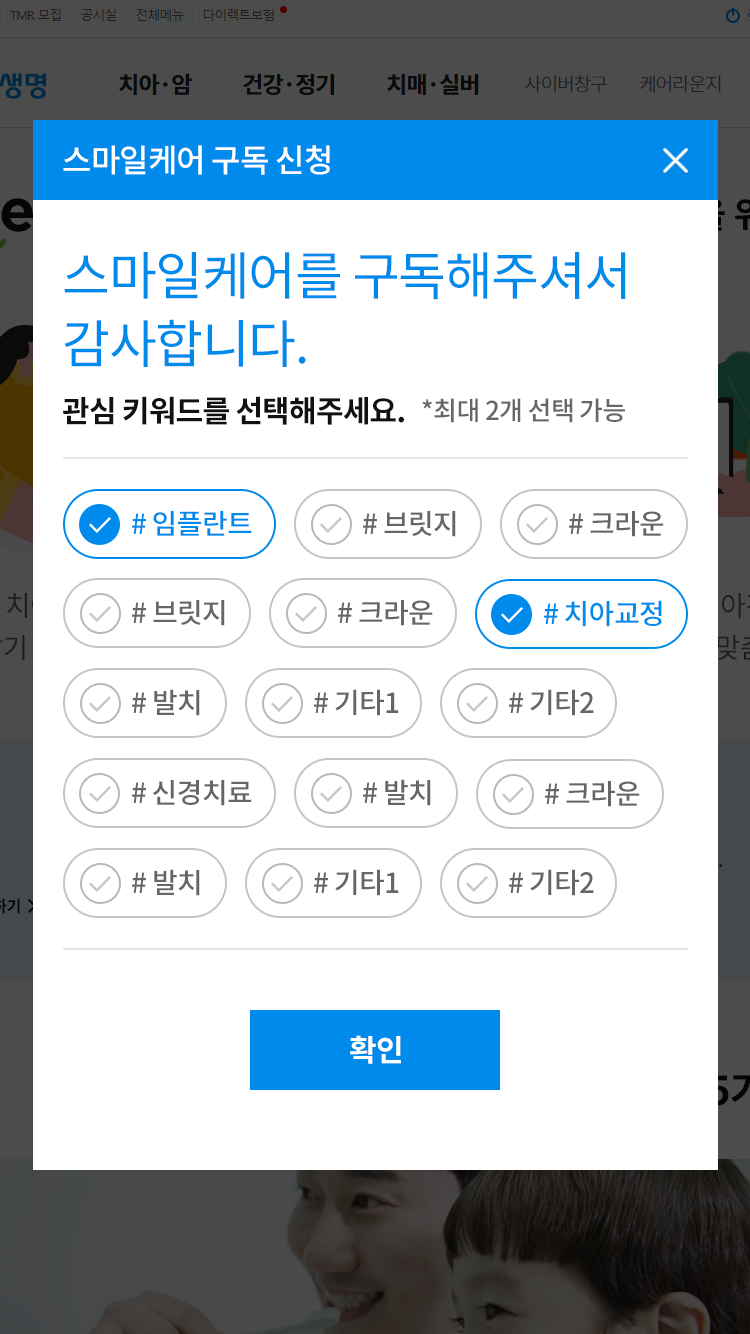
<style>
.page{position:relative;width:750px;height:1334px;background:#ffffff}
.page>*{position:absolute;margin:0}
.t1{font:32px "NotoSansCJKkr-Medium";letter-spacing:-0.025em;color:#ffffff}
.t2{font:52px/68px "NotoSansCJKkr-Regular";letter-spacing:-0.025em;color:#008bec}
.t3{font:30px "NotoSansCJKkr-Bold";letter-spacing:-0.025em;color:#111111}
.t4{font:26px "NotoSansCJKkr-Medium";letter-spacing:-0.025em;color:#666666}
.t5{font:28px "NotoSansCJKkr-Medium";letter-spacing:-0.025em;color:#008bec}
.t6{font:28px "NotoSansCJKkr-Medium";letter-spacing:-0.025em;color:#666666}
.t7{font:30px "NotoSansCJKkr-Bold";letter-spacing:-0.025em;color:#ffffff}
</style>
<div class="page">
<p class="t1" style="left:63px;top:145px;width:267px;height:30px">스마일케어 구독 신청</p>
<p class="t2" style="left:64px;top:252px;width:562px;height:115px">스마일케어를 구독해주셔서 <br>감사합니다.</p>
<p class="t3" style="left:63px;top:396px;width:341px;height:29px">관심 키워드를 선택해주세요.</p>
<p class="t4" style="left:422px;top:398px;width:203px;height:25px">*최대 2개 선택 가능</p>
<p class="t5" style="left:132px;top:511px;width:120px;height:25px"># 임플란트</p>
<p class="t6" style="left:363px;top:511px;width:93px;height:26px"># 브릿지</p>
<p class="t6" style="left:569px;top:511px;width:95px;height:26px"># 크라운</p>
<p class="t6" style="left:132px;top:600px;width:93px;height:26px"># 브릿지</p>
<p class="t6" style="left:338px;top:600px;width:95px;height:26px"># 크라운</p>
<p class="t5" style="left:544px;top:600px;width:118px;height:27px"># 치아교정</p>
<p class="t6" style="left:132px;top:689px;width:68px;height:27px"># 발치</p>
<p class="t6" style="left:314px;top:689px;width:85px;height:27px"># 기타1</p>
<p class="t6" style="left:509px;top:689px;width:85px;height:27px"># 기타2</p>
<p class="t6" style="left:132px;top:780px;width:120px;height:26px"># 신경치료</p>
<p class="t6" style="left:363px;top:779px;width:68px;height:27px"># 발치</p>
<p class="t6" style="left:545px;top:781px;width:95px;height:26px"># 크라운</p>
<p class="t6" style="left:132px;top:869px;width:68px;height:27px"># 발치</p>
<p class="t6" style="left:314px;top:869px;width:85px;height:27px"># 기타1</p>
<p class="t6" style="left:509px;top:869px;width:85px;height:27px"># 기타2</p>
<p class="t7" style="left:350px;top:1035px;width:51px;height:29px">확인</p>
</div>
